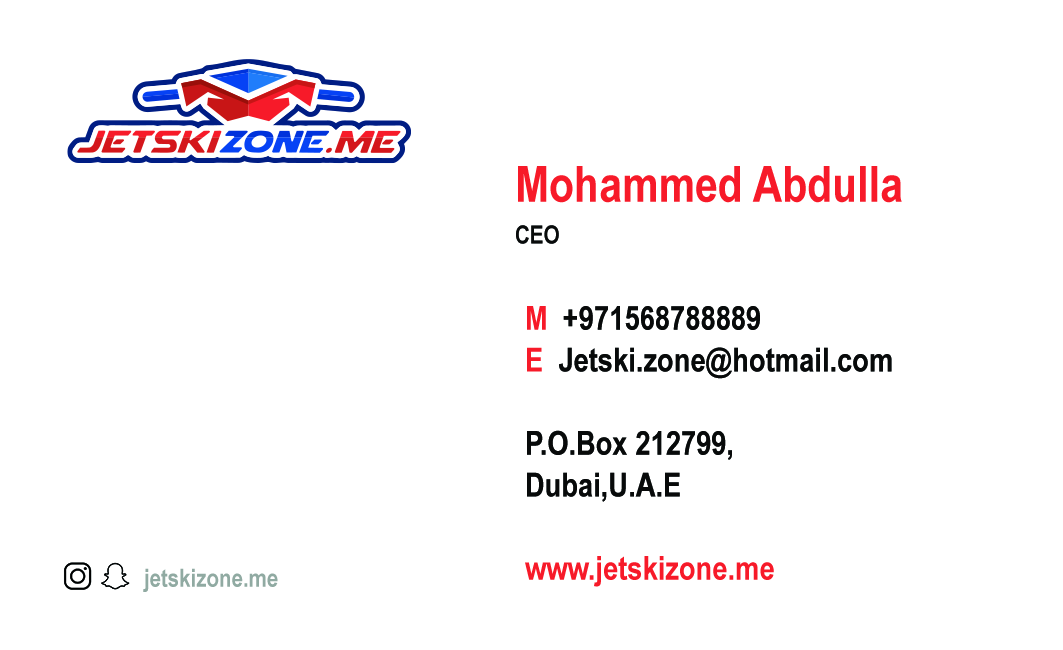
<style>
.page{position:relative;width:1063px;height:650px;background:#ffffff}
.page>*{position:absolute;margin:0}
.t1{font:50px/41.7px "ArialNarrow-Bold";color:#f71a29}
.t2{font:25px/41.7px "ArialNarrow-Bold";color:#090b0b}
.t3{font:33.3px/41.7px "ArialNarrow-Bold";color:#080a0a}
.t4{font:33.3px/41.7px "ArialNarrow-Bold";color:#f71a29}
.t5{font:25px "ArialNarrow-Bold";color:#8fa9a1}
</style>
<div class="page">
<p class="t1" style="left:516px;top:166px;width:386px;height:78px">Mohammed Abdulla<br><span class="t2">CEO</span></p>
<p class="t3" style="left:525px;top:306px;width:367px;height:281px"><span class="t4">M  </span>+971568788889<br><span class="t4">E  </span>Jetski.zone@hotmail.com<br><br>P.O.Box 212799,<br>Dubai,U.A.E<br><br><span class="t4">www.jetskizone.me</span></p>
<p class="t5" style="left:143px;top:568px;width:135px;height:24px">jetskizone.me</p>
</div>
